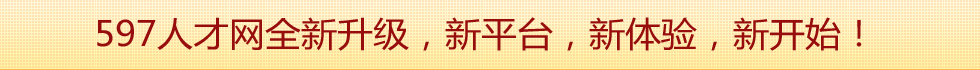
<style>
.page{position:relative;width:980px;height:70px}
.page>*{position:absolute;margin:0}
.t1{font:34.2px "MicrosoftYaHei";color:#970c0c;scale:1.05 1}
</style>
<div class="page">
<p class="t1" style="left:97px;top:17px;width:765px;height:34px">597人才网全新升级，新平台，新体验，新开始！</p>
</div>
